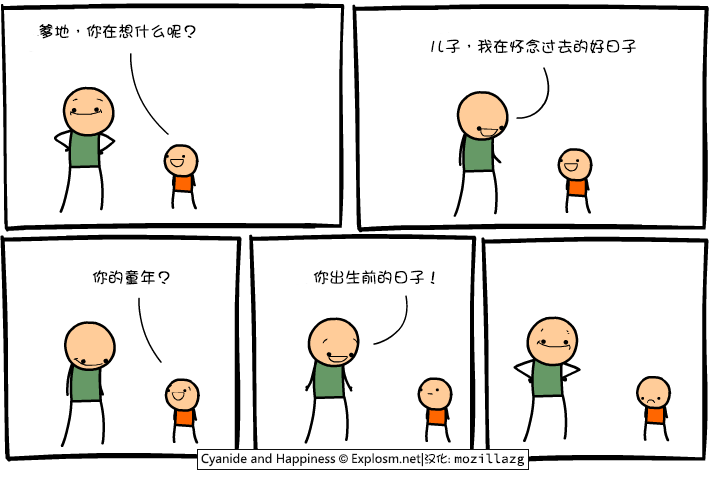
<style>
.page{position:relative;width:720px;height:480px;background:#ffffff}
.page>*{position:absolute;margin:0}
.t1{font:16px "DFGirl";color:#000000}
</style>
<div class="page">
<p class="t1" style="left:39px;top:24px;width:157px;height:15px">爹地，你在想什么呢？</p>
<p class="t1" style="left:431px;top:39px;width:205px;height:15px">儿子，我在怀念过去的好日子</p>
<p class="t1" style="left:92px;top:270px;width:78px;height:15px">你的童年？</p>
<p class="t1" style="left:313px;top:270px;width:122px;height:15px">你出生前的日子！</p>
</div>
